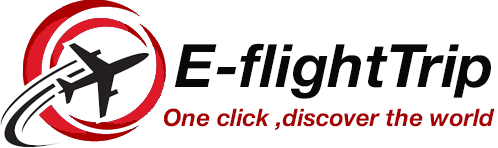
<style>
.page{position:relative;width:498px;height:148px;background:#ffffff}
.page>*{position:absolute;margin:0}
.t1{font:60px "HelveticaNeue-BoldItalic";color:#080808}
.t2{font:24px "HelveticaNeue-BoldItalic";color:#a60203}
</style>
<div class="page">
<p class="t1" style="left:174px;top:43px;width:317px;height:56px">E-flightTrip</p>
<p class="t2" style="left:164px;top:108px;width:331px;height:22px">One click ,discover the world</p>
</div>
